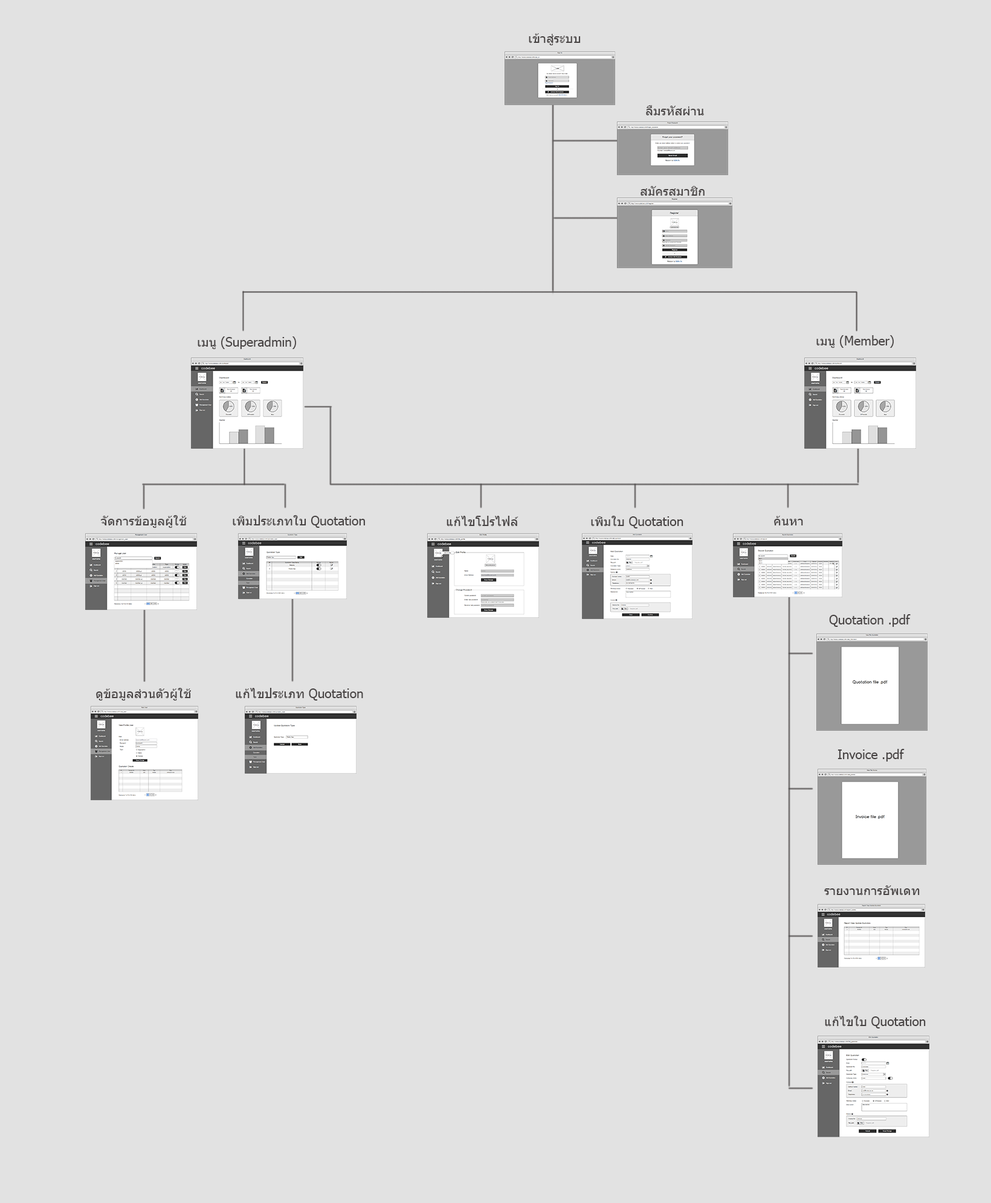
<style>
.page{position:relative;width:991px;height:1203px;background:#e2e2e2}
.page>*{position:absolute;margin:0}
.t1{font:12.7px "Tahoma";color:#474343}
</style>
<div class="page">
<p class="t1" style="left:529px;top:33px;width:52px;height:12px">เข้าสู่ระบบ</p>
<p class="t1" style="left:646px;top:105px;width:58px;height:10px">ลืมรหัสผ่าน</p>
<p class="t1" style="left:640px;top:186px;width:64px;height:10px">สมัครสมาชิก</p>
<p class="t1" style="left:198px;top:337px;width:98px;height:12px">เมนู (Superadmin)</p>
<p class="t1" style="left:816px;top:335px;width:78px;height:13px">เมนู (Member)</p>
<p class="t1" style="left:100px;top:515px;width:87px;height:13px">จัดการข้อมูลผู้ใช้</p>
<p class="t1" style="left:233px;top:515px;width:132px;height:13px">เพิ่มประเภทใบ Quotation</p>
<p class="t1" style="left:446px;top:516px;width:72px;height:10px">แก้ไขโปรไฟล์</p>
<p class="t1" style="left:591px;top:516px;width:92px;height:13px">เพิ่มใบ Quotation</p>
<p class="t1" style="left:774px;top:516px;width:29px;height:10px">ค้นหา</p>
<p class="t1" style="left:829px;top:614px;width:81px;height:13px">Quotation .pdf</p>
<p class="t1" style="left:96px;top:688px;width:95px;height:13px">ดูข้อมูลส่วนตัวผู้ใช้</p>
<p class="t1" style="left:236px;top:688px;width:127px;height:13px">แก้ไขประเภท Quotation</p>
<p class="t1" style="left:837px;top:749px;width:67px;height:13px">Invoice .pdf</p>
<p class="t1" style="left:824px;top:886px;width:96px;height:9px">รายงานการอัพเดท</p>
<p class="t1" style="left:825px;top:1016px;width:101px;height:13px">แก้ไขใบ Quotation</p>
</div>
